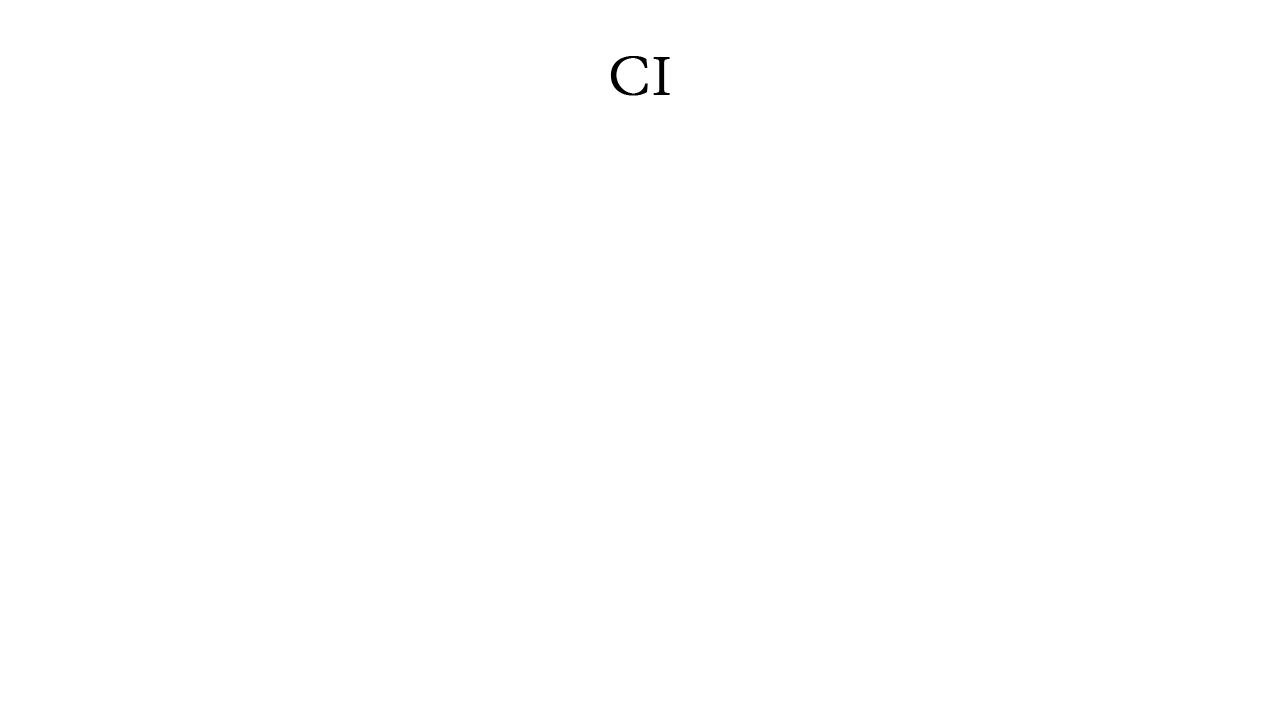
<style>
.page{position:relative;width:1280px;height:720px;background:#ffffff}
.page>*{position:absolute;margin:0}
.t1{font:60px "CormorantGaramond-Light";color:#000000;font-weight:bold}
</style>
<div class="page">
<p class="t1" style="left:610px;top:56px;width:60px;height:40px">CI</p>
</div>
